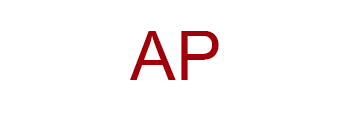
<style>
.page{position:relative;width:350px;height:120px;background:#ffffff}
.page>*{position:absolute;margin:0}
.t1{font:72px "OpusChordsSans";color:#a1000b}
.t2{font:24px "AGaramondPro-Regular";color:#000000}
</style>
<div class="page">
<p class="t1" style="left:129px;top:31px;width:90px;height:49px"><span class="t2"><br></span>AP</p>
</div>
